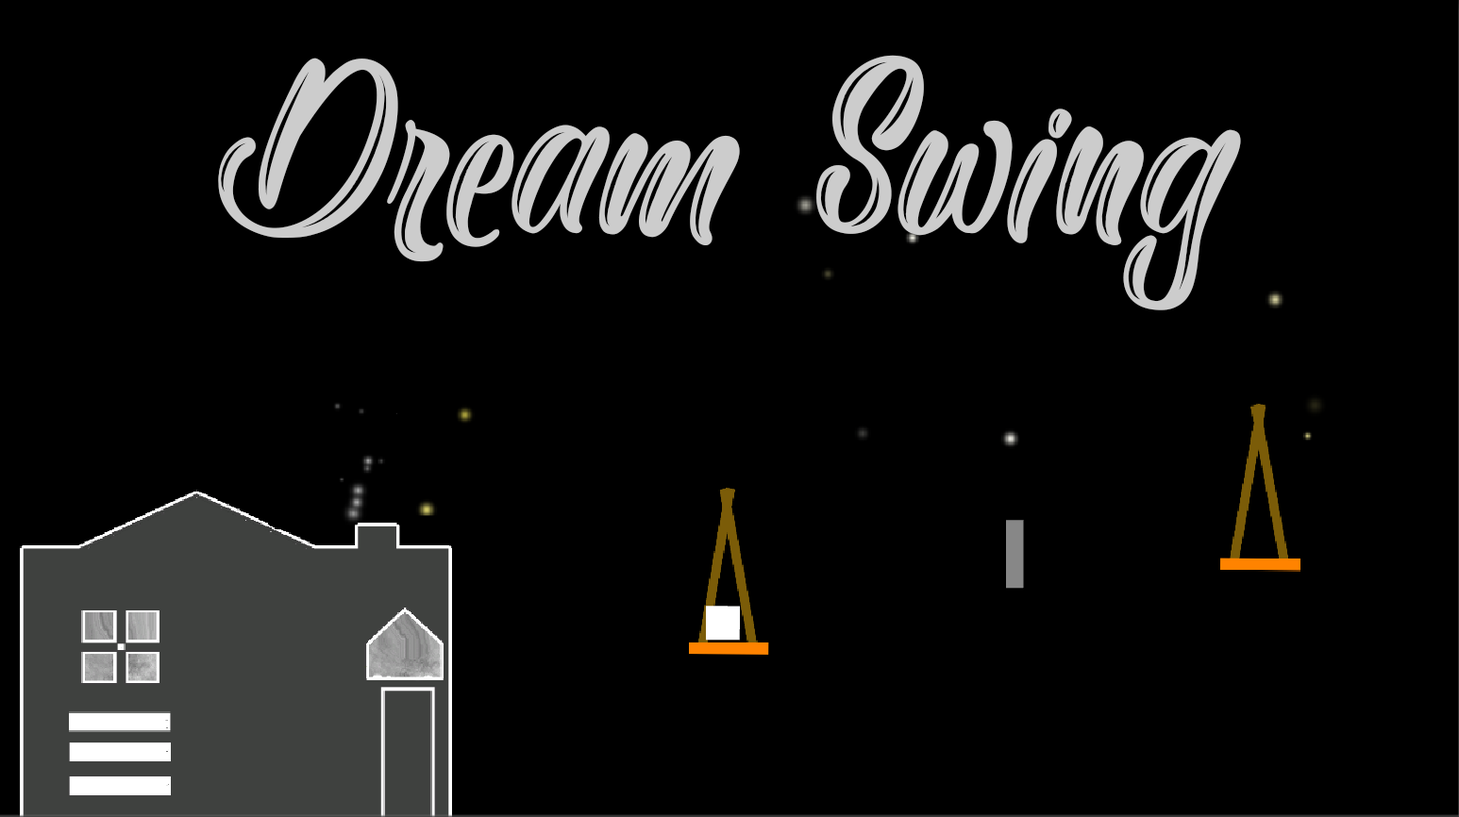
<style>
.page{position:relative;width:1459px;height:817px;background:#000000}
.page>*{position:absolute;margin:0}
.t1{font:283.1px "Yakuza-Lobster";color:#cccccc}
</style>
<div class="page">
<p class="t1" style="left:218px;top:55px;width:1023px;height:255px">Dream Swing</p>
</div>
